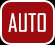
<style>
.page{position:relative;width:55px;height:45px;background:#9e0b0f}
.page>*{position:absolute;margin:0}
.t1{font:24px "AgencyFB-Reg";color:#ffffff}
</style>
<div class="page">
<p class="t1" style="left:8px;top:13px;width:38px;height:19px">AUTO</p>
</div>
